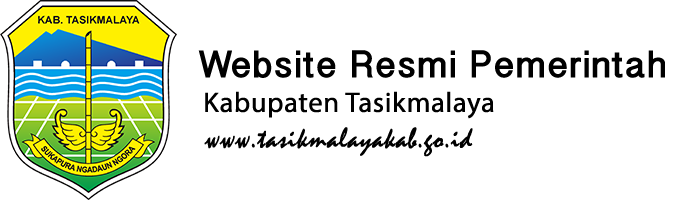
<style>
.page{position:relative;width:678px;height:200px;background:#ffffff}
.page>*{position:absolute;margin:0}
.t1{font:38.4px "MalayalamSangamMN-Bold";color:#000000;font-weight:bold}
.t2{font:28.3px "MyriadPro-Regular";color:#000000;font-weight:bold}
.t3{font:29.1px "Mistral";color:#000000;font-weight:bold}
</style>
<div class="page">
<p class="t1" style="left:198px;top:50px;width:467px;height:28px">Website Resmi Pemerintah</p>
<p class="t2" style="left:205px;top:91px;width:289px;height:28px">Kabupaten Tasikmalaya</p>
<p class="t3" style="left:204px;top:127px;width:269px;height:30px">www.tasikmalayakab.go.id</p>
</div>
